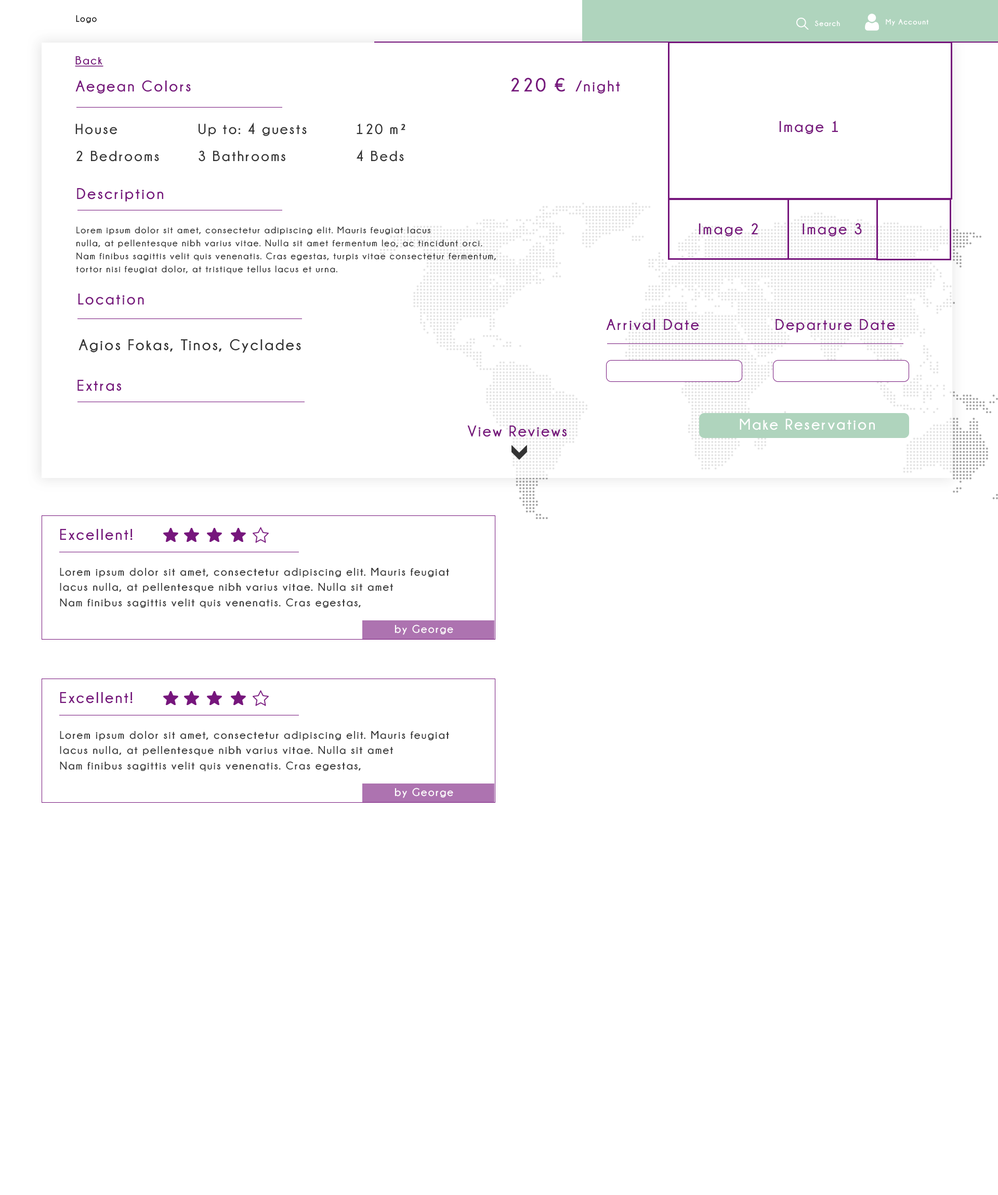
<style>
.page{position:relative;width:998px;height:1195px;background:#ffffff}
.page>*{position:absolute;margin:0}
.t1{font:9.4px "Champagne&Limousines-Bold";letter-spacing:0.1em;color:#000000;scale:0.94 1}
.t2{font:7.5px "Champagne&Limousines-Bold";letter-spacing:0.1em;color:#ffffff}
.t3{font:11.7px "Champagne&Limousines-Bold";letter-spacing:0.1em;color:#76167c;text-decoration:underline}
.t4{font:19.2px "Champagne&Limousines-Bold";letter-spacing:0.1em;color:#76167c}
.t5{font:15.6px "Champagne&Limousines-Bold";letter-spacing:0.1em;color:#76167c}
.t6{font:14.6px/27px "Champagne&Limousines-Bold";letter-spacing:0.1em;color:#333333}
.t7{font:9.4px/13px "Champagne&Limousines-Bold";letter-spacing:0.1em;color:#333333}
.t8{font:15.6px "Champagne&Limousines-Bold";letter-spacing:0.1em;color:#333333}
.t9{font:15.6px "Champagne&Limousines-Bold";letter-spacing:0.1em;color:#ffffff}
.t10{font:11.1px/15.5px "Champagne&Limousines-Bold";letter-spacing:0.1em;color:#333333}
.t11{font:11.1px "Champagne&Limousines-Bold";letter-spacing:0.1em;color:#fffefe}
</style>
<div class="page">
<p class="t1" style="left:76px;top:15px;width:21px;height:8px">Logo</p>
<p class="t2" style="left:814px;top:20px;width:26px;height:7px">Search</p>
<p class="t2" style="left:885px;top:19px;width:44px;height:7px">My Account</p>
<p class="t3" style="left:75px;top:56px;width:28px;height:11px">Back</p>
<p class="t4" style="left:511px;top:77px;width:54px;height:15px">220 €</p>
<p class="t5" style="left:75px;top:80px;width:116px;height:14px">Aegean Colors</p>
<p class="t5" style="left:575px;top:81px;width:45px;height:13px">/night</p>
<p class="t6" style="left:75px;top:122px;width:330px;height:40px">House     Up to: 4 guests   120 m²<br>2 Bedrooms   3 Bathrooms    4 Beds</p>
<p class="t5" style="left:779px;top:121px;width:59px;height:13px">Image 1</p>
<p class="t5" style="left:77px;top:188px;width:86px;height:14px">Description</p>
<p class="t7" style="left:76px;top:227px;width:420px;height:47px">Lorem ipsum dolor sit amet, consectetur adipiscing elit. Mauris feugiat lacus <br>nulla, at pellentesque nibh varius vitae. Nulla sit amet fermentum leo, ac tincidunt orci. <br>Nam finibus sagittis velit quis venenatis. Cras egestas, turpis vitae consectetur fermentum, <br>tortor nisi feugiat dolor, at tristique tellus lacus et urna.</p>
<p class="t5" style="left:698px;top:223px;width:60px;height:13px">Image 2</p>
<p class="t5" style="left:802px;top:223px;width:60px;height:13px">Image 3</p>
<p class="t5" style="left:78px;top:294px;width:66px;height:11px">Location</p>
<p class="t5" style="left:606px;top:319px;width:289px;height:14px">Arrival Date     Departure Date</p>
<p class="t8" style="left:78px;top:339px;width:223px;height:14px">Agios Fokas, Tinos, Cyclades</p>
<p class="t5" style="left:77px;top:380px;width:44px;height:11px">Extras</p>
<p class="t5" style="left:467px;top:426px;width:99px;height:11px">View Reviews</p>
<p class="t9" style="left:739px;top:419px;width:136px;height:11px">Make Reservation</p>
<p class="t5" style="left:60px;top:529px;width:73px;height:11px">Excellent!</p>
<p class="t10" style="left:60px;top:567px;width:389px;height:41px">Lorem ipsum dolor sit amet, consectetur adipiscing elit. Mauris feugiat <br>lacus nulla, at pellentesque nibh varius vitae. Nulla sit amet <br>Nam finibus sagittis velit quis venenatis. Cras egestas,</p>
<p class="t11" style="left:394px;top:625px;width:59px;height:10px">by George</p>
<p class="t5" style="left:60px;top:692px;width:73px;height:12px">Excellent!</p>
<p class="t10" style="left:60px;top:731px;width:389px;height:41px">Lorem ipsum dolor sit amet, consectetur adipiscing elit. Mauris feugiat <br>lacus nulla, at pellentesque nibh varius vitae. Nulla sit amet <br>Nam finibus sagittis velit quis venenatis. Cras egestas,</p>
<p class="t11" style="left:394px;top:788px;width:59px;height:10px">by George</p>
</div>
